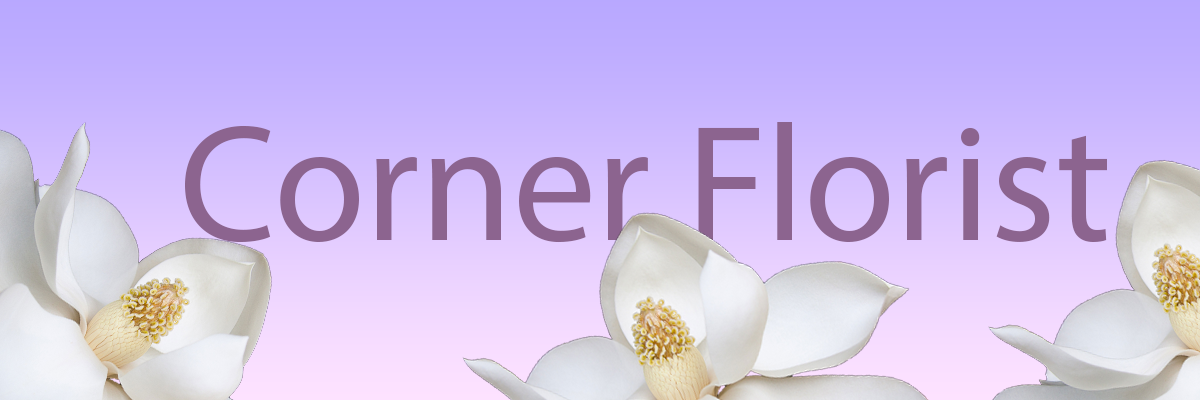
<style>
.page{position:relative;width:1200px;height:400px}
.page>*{position:absolute;margin:0}
.t1{font:166.7px "MyriadPro-Regular";color:#8c648f}
</style>
<div class="page">
<p class="t1" style="left:185px;top:122px;width:922px;height:121px">Corner Florist</p>
</div>
